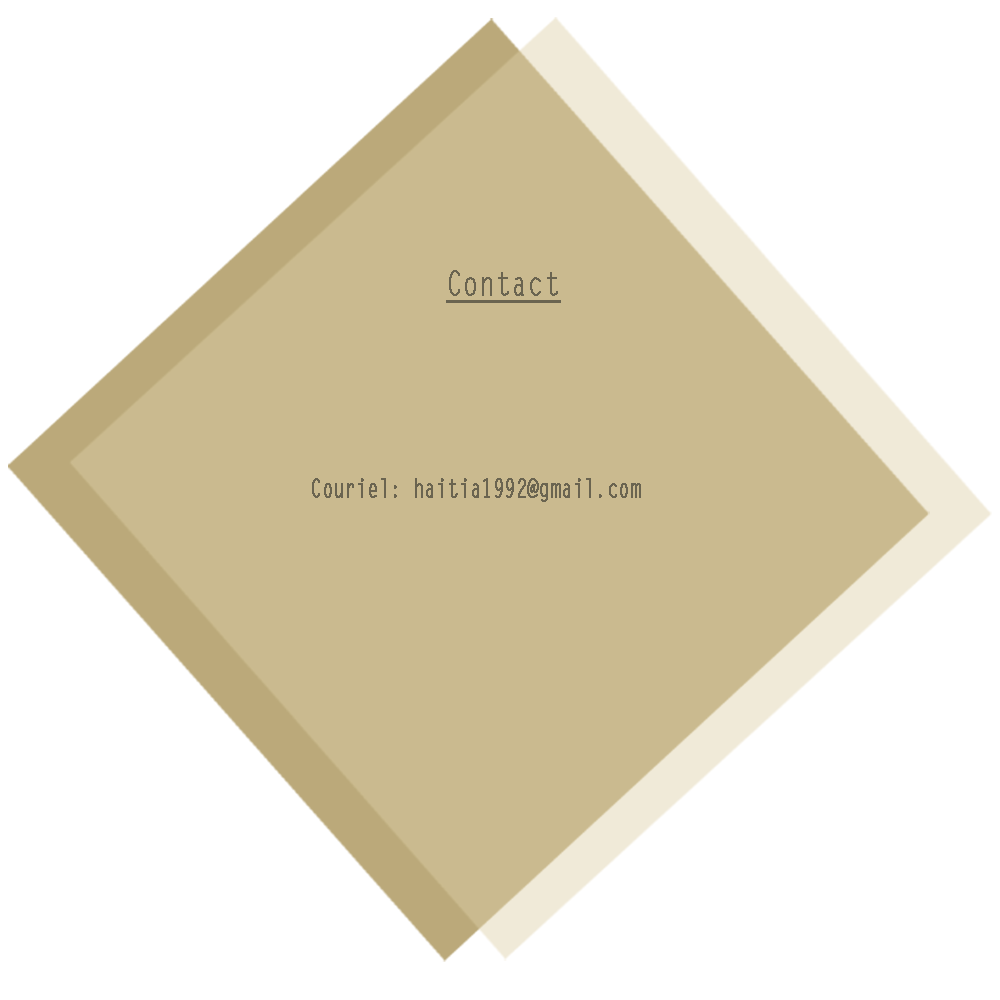
<style>
.page{position:relative;width:1000px;height:1000px;background:#ffffff}
.page>*{position:absolute;margin:0}
.t1{font:33.3px "LetterGothicStd";color:#6a6450;font-weight:bold;text-decoration:underline;scale:0.78 1}
.t2{font:25px "LetterGothicStd";color:#6a6450;font-weight:bold;scale:0.73 1}
</style>
<div class="page">
<p class="t1" style="left:446px;top:270px;width:115px;height:33px">Contact</p>
<p class="t2" style="left:312px;top:478px;width:329px;height:24px">Couriel: haitia1992@gmail.com</p>
</div>
